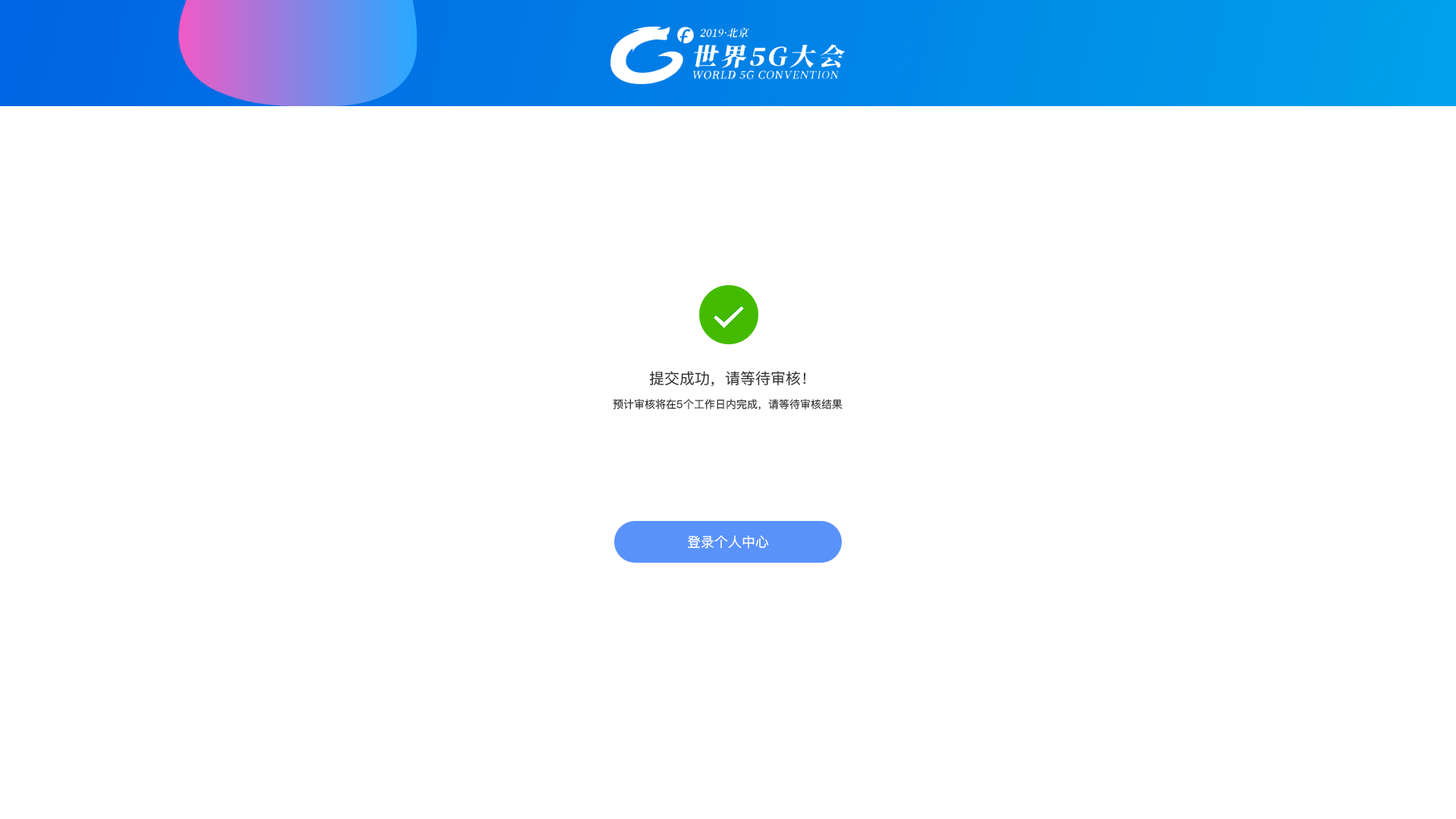
<style>
.page{position:relative;width:1456px;height:819px;background:#ffffff}
.page>*{position:absolute;margin:0}
.t1{font:15.2px "PingFangSC-Regular";color:#333333}
.t2{font:10.6px "PingFangSC-Regular";color:#333333}
.t3{font:13.6px "PingFangSC-Regular";color:#ffffff}
</style>
<div class="page">
<p class="t1" style="left:649px;top:371px;width:157px;height:16px">提交成功，请等待审核！</p>
<p class="t2" style="left:613px;top:399px;width:229px;height:11px">预计审核将在5个工作日内完成，请等待审核结果</p>
<p class="t3" style="left:687px;top:535px;width:82px;height:13px">登录个人中心</p>
</div>
